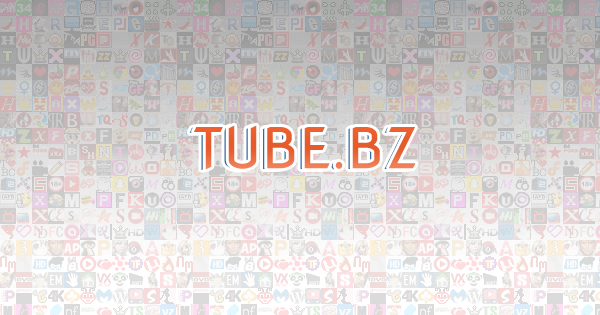
<style>
.page{position:relative;width:600px;height:315px}
.page>*{position:absolute;margin:0}
.t1{font:56px "NovaFlat";color:#eb6131}
</style>
<div class="page">
<p class="t1" style="left:194px;top:125px;width:222px;height:45px">TUBE.BZ</p>
</div>
